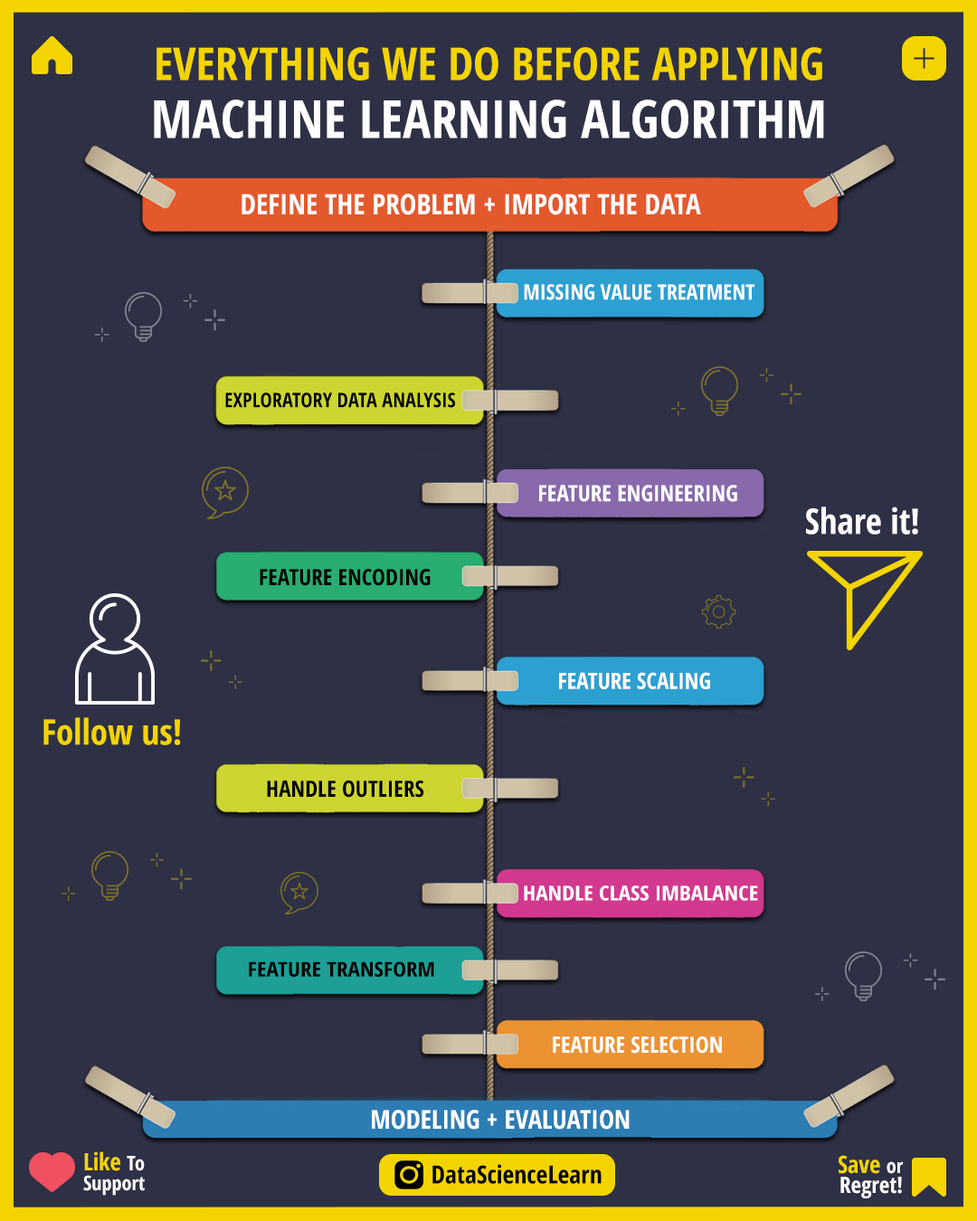
<style>
.page{position:relative;width:977px;height:1221px;background:#2e3045}
.page>*{position:absolute;margin:0}
.t1{font:45.2px/57.8px "OpenSans-CondensedBold";color:#f3d400}
.t2{font:52.8px/57.8px "OpenSans-CondensedBold";color:#fefefe}
.t3{font:28.2px "OpenSans-CondensedBold";color:#ffffff}
.t4{font:21.4px "OpenSans-CondensedBold";color:#ffffff}
.t5{font:20.1px "OpenSans-CondensedBold";color:#010101}
.t6{font:22.6px "OpenSans-CondensedBold";color:#ffffff}
.t7{font:35.2px "OpenSans-CondensedBold";color:#ffffff}
.t8{font:22.6px "OpenSans-CondensedBold";color:#000000}
.t9{font:35.2px "OpenSans-CondensedBold";color:#f3d400}
.t10{font:20.3px "OpenSans-CondensedBold";color:#ffffff;scale:1.11 1}
.t11{font:20.3px "OpenSans-CondensedBold";color:#000000;scale:1.11 1}
.t12{font:25.9px "OpenSans-CondensedBold";color:#ffffff}
.t13{font:20.1px/20.1px "OpenSans-CondensedBold";color:#ffffff}
.t14{font:23.9px/20.1px "OpenSans-CondensedBold";color:#f3d400}
.t15{font:22.6px/20.1px "OpenSans-CondensedBold";color:#ffffff}
.t16{font:25.1px "OpenSans-CondensedBold";color:#000000}
</style>
<div class="page">
<p class="t1" style="left:154px;top:47px;width:670px;height:91px;text-align:center">EVERYTHING WE DO BEFORE APPLYING<br><span class="t2">MACHINE LEARNING ALGORITHM</span></p>
<p class="t3" style="left:241px;top:194px;width:460px;height:21px">DEFINE THE PROBLEM + IMPORT THE DATA</p>
<p class="t4" style="left:524px;top:284px;width:230px;height:16px">MISSING VALUE TREATMENT</p>
<p class="t5" style="left:225px;top:392px;width:231px;height:16px">EXPLORATORY DATA ANALYSIS</p>
<p class="t6" style="left:539px;top:485px;width:198px;height:17px">FEATURE ENGINEERING</p>
<p class="t7" style="left:806px;top:506px;width:112px;height:28px">Share it!</p>
<p class="t8" style="left:260px;top:568px;width:170px;height:18px">FEATURE ENCODING</p>
<p class="t6" style="left:559px;top:672px;width:151px;height:17px">FEATURE SCALING</p>
<p class="t9" style="left:43px;top:717px;width:138px;height:28px">Follow us!</p>
<p class="t8" style="left:267px;top:780px;width:157px;height:18px">HANDLE OUTLIERS</p>
<p class="t10" style="left:524px;top:885px;width:234px;height:16px">HANDLE CLASS IMBALANCE</p>
<p class="t11" style="left:249px;top:961px;width:185px;height:16px">FEATURE TRANSFORM</p>
<p class="t6" style="left:553px;top:1035px;width:169px;height:19px">FEATURE SELECTION</p>
<p class="t12" style="left:372px;top:1110px;width:257px;height:20px">MODELING + EVALUATION</p>
<p class="t13" style="left:83px;top:1151px;width:62px;height:45px"><span class="t14">Like </span>To<br>Support</p>
<p class="t15" style="left:838px;top:1155px;width:65px;height:43px;text-align:right"><span class="t14">Save </span><span class="t13">or<br></span>Regret!</p>
<p class="t16" style="left:432px;top:1164px;width:169px;height:20px">DataScienceLearn</p>
</div>
